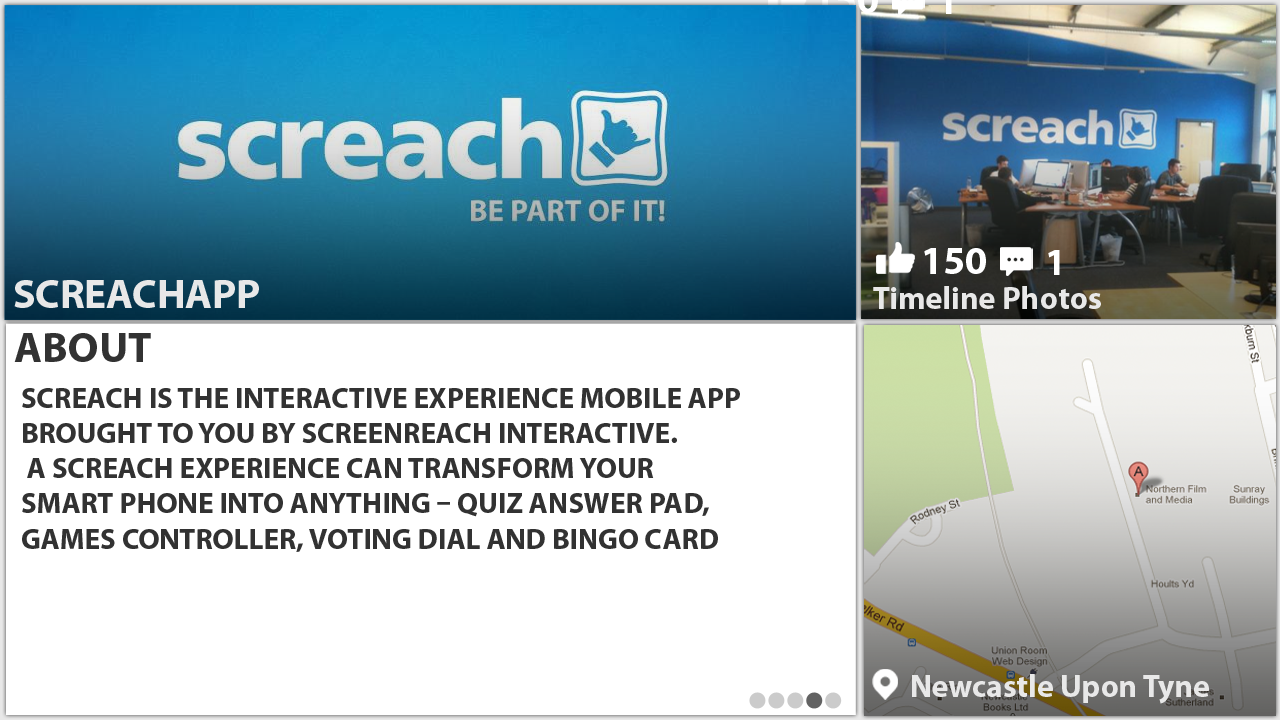
<style>
.page{position:relative;width:1280px;height:720px;background:#ffffff}
.page>*{position:absolute;margin:0}
.t1{font:39.4px "MyriadPro-Bold";color:#ffffff;text-transform:uppercase}
.t2{font:37.9px "MyriadPro-Bold";color:#ffffff;text-transform:uppercase}
.t3{font:41.3px "MyriadPro-Bold";color:#e8e8e8}
.t4{font:32px "MyriadPro-Bold";color:#e8e8e8}
.t5{font:42.8px "MyriadPro-Bold";color:#323232;text-transform:uppercase}
.t6{font:29.2px "MyriadPro-Bold";color:#323232;text-transform:uppercase}
.t7{font:31.6px "MyriadPro-Bold";color:#e8e8e8}
</style>
<div class="page">
<p class="t1" style="left:924px;top:248px;width:62px;height:26px">150</p>
<p class="t2" style="left:1048px;top:250px;width:12px;height:25px">1</p>
<p class="t3" style="left:14px;top:280px;width:245px;height:28px">SCREACHAPP</p>
<p class="t4" style="left:873px;top:286px;width:228px;height:23px">Timeline Photos</p>
<p class="t5" style="left:14px;top:333px;width:137px;height:29px">about</p>
<p class="t6" style="left:22px;top:388px;width:718px;height:164px">Screach is the interactive experience Mobile App <br>brought to you by ScreenReach Interactive.<br> A Screach experience can transform your <br>smart phone into anything – quiz answer pad, <br>games controller, voting dial and bingo card</p>
<p class="t7" style="left:912px;top:674px;width:297px;height:30px">Newcastle Upon Tyne</p>
</div>
